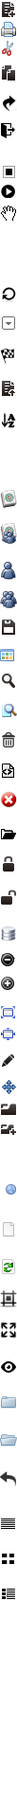
<style>
.page{position:relative;width:17px;height:1798px;background:#ffffff}
.page>*{position:absolute;margin:0}
.t1{font:9.5px/45.9px "CooperBlack";letter-spacing:-0.05em;color:#000000}
.t2{font:8.5px/45.9px "CooperBlack";letter-spacing:-0.05em;color:#000000}
</style>
<div class="page">
<p class="t1" style="left:8px;top:413px;width:8px;height:8px">A<br>Z<br>Z</p>
<p class="t2" style="left:9px;top:421px;width:6px;height:7px">Z<br><br>Z<br>Z</p>
</div>
